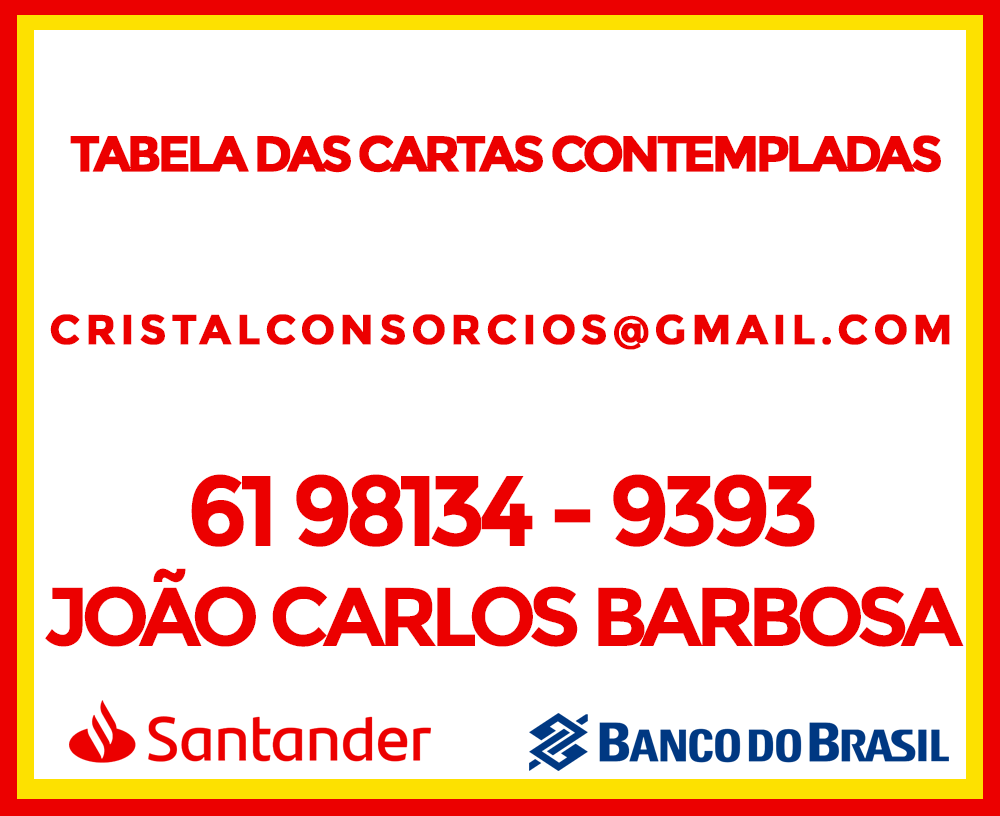
<style>
.page{position:relative;width:1000px;height:816px;background:#ffffff}
.page>*{position:absolute;margin:0}
.t1{font:50px "Montserrat-Bold";letter-spacing:-0.1em;color:#ec0000;text-transform:uppercase;font-weight:bold}
.t2{font:41.7px "Montserrat-Bold";letter-spacing:0.1em;color:#ec0000;text-transform:uppercase;font-weight:bold}
.t3{font:83.3px "Montserrat-Bold";letter-spacing:-0.075em;color:#ec0000;text-transform:uppercase}
.t4{font:100px "Montserrat-Bold";letter-spacing:-0.075em;color:#ec0000;text-transform:uppercase}
</style>
<div class="page">
<p class="t1" style="left:70px;top:135px;width:871px;height:38px">TABELA DAS CARTAS CONTEMPLADAS</p>
<p class="t2" style="left:50px;top:314px;width:900px;height:36px">Cristalconsorcios@gmail.com</p>
<p class="t3" style="left:45px;top:474px;width:919px;height:173px;text-align:center"><span class="t4">61 98134 - 9393<br></span>JoÃo carlos barbosa</p>
</div>
